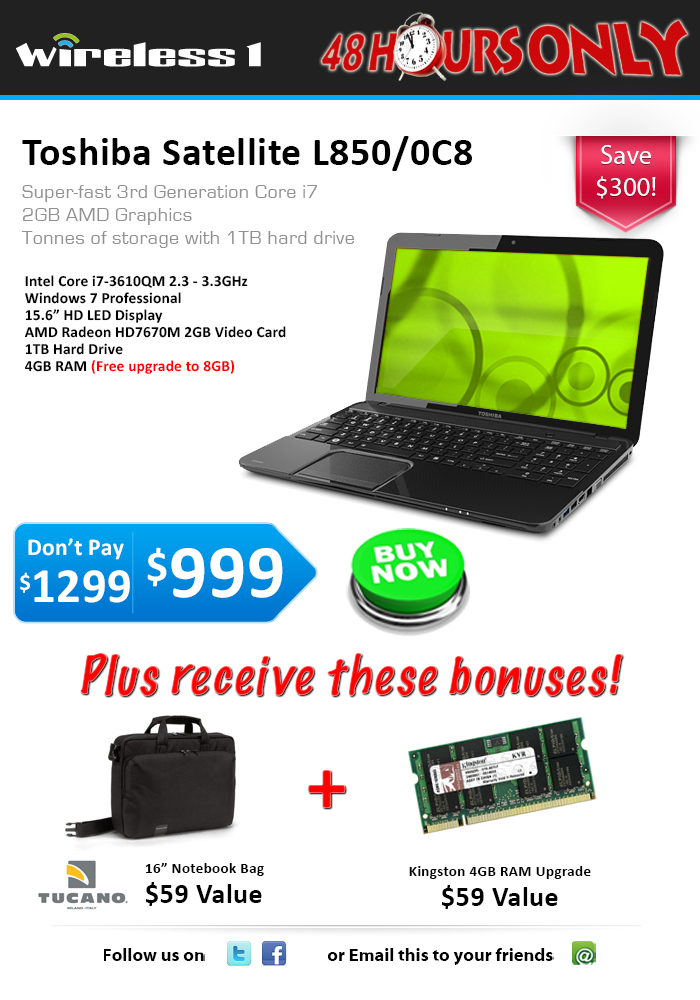
<style>
.page{position:relative;width:700px;height:1000px;background:#ffffff}
.page>*{position:absolute;margin:0}
.t1{font:20.5px/23px "EurostileRegular";letter-spacing:0.01em;color:#929191}
.t2{font:40.5px/11.9px "Calibri-Bold";letter-spacing:0.01em;color:#000000}
.t3{font:20.5px/33px "EurostileRegular";letter-spacing:0.01em;color:#929191}
.t4{font:27px "MyriadPro-Regular";color:#fcfcfc}
.t5{font:15.5px/16.9px "Calibri-Bold";letter-spacing:0.01em;color:#000000}
.t6{font:15.5px/16.9px "Calibri-Bold";letter-spacing:0.01em;color:#fe0000}
.t7{font:23.9px/47.2px "Calibri-Bold";letter-spacing:0.01em;color:#ffffff}
.t8{font:23.2px/47.2px "Calibri-Bold";letter-spacing:0.01em;color:#ffffff}
.t9{font:49.4px/47.2px "Calibri-Bold";letter-spacing:0.01em;color:#ffffff}
.t10{font:76.4px "Calibri-Bold";letter-spacing:0.01em;color:#ffffff}
.t11{font:49.5px "MarkerFelt-Thin";letter-spacing:0.01em;font-style:italic}
.t12{font:83.5px "Calibri-Bold";letter-spacing:0.01em;color:#ff0000}
.t13{font:28.5px/29.9px "Calibri-Bold";letter-spacing:0.01em;color:#000000}
.t14{font:18px "MyriadWebPro-Bold";color:#000000}
</style>
<div class="page">
<p class="t1" style="left:21px;top:136px;width:451px;height:112px"><span class="t2">Toshiba Satellite L850/0C8<br></span><span class="t3">Super-fast 3rd Generation Core i7<br></span>2GB AMD Graphics<br>Tonnes of storage with 1TB hard drive</p>
<p class="t4" style="left:596px;top:145px;width:60px;height:54px;text-align:center">Save<br>$300!</p>
<p class="t5" style="left:24px;top:275px;width:262px;height:99px">Intel Core i7-3610QM 2.3 - 3.3GHz<br>Windows 7 Professional<br>15.6” HD LED Display<br>AMD Radeon HD7670M 2GB Video Card<br>1TB Hard Drive<br>4GB RAM <span class="t6">(Free upgrade to 8GB)</span></p>
<p class="t7" style="left:20px;top:538px;width:110px;height:65px;text-align:center">Don’t Pay<br><span class="t8">$</span><span class="t9">1299</span></p>
<p class="t10" style="left:147px;top:547px;width:136px;height:51px">$999</p>
<p class="t11" style="left:80px;top:653px;width:543px;height:43px">Plus receive these bonuses!</p>
<p class="t12" style="left:308px;top:770px;width:38px;height:38px">+</p>
<p class="t5" style="left:146px;top:863px;width:118px;height:43px">16” Notebook Bag<br><span class="t13">$59 Value</span></p>
<p class="t5" style="left:409px;top:866px;width:182px;height:43px;text-align:center">Kingston 4GB RAM Upgrade<br><span class="t13">$59 Value</span></p>
<p class="t14" style="left:104px;top:948px;width:101px;height:13px">Follow us on</p>
<p class="t14" style="left:328px;top:948px;width:226px;height:17px">or Email this to your friends</p>
</div>
